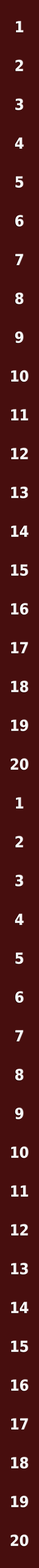
<style>
.page{position:relative;width:39px;height:1568px;background:#470e0e}
.page>*{position:absolute;margin:0}
.t1{font:15.2px/38.8px "DejaVuSansCondensed-Bold";color:#f7f7f7}
</style>
<div class="page">
<p class="t1" style="left:11px;top:21px;width:17px;height:1525px;text-align:center">1<br>2<br>3<br>4<br>5<br>6<br>7<br>8<br>9<br>10<br>11<br>12<br>13<br>14<br>15<br>16<br>17<br>18<br>19<br>20<br>1<br>2<br>3<br>4<br>5<br>6<br>7<br>8<br>9<br>10<br>11<br>12<br>13<br>14<br>15<br>16<br>17<br>18<br>19<br>20</p>
</div>
